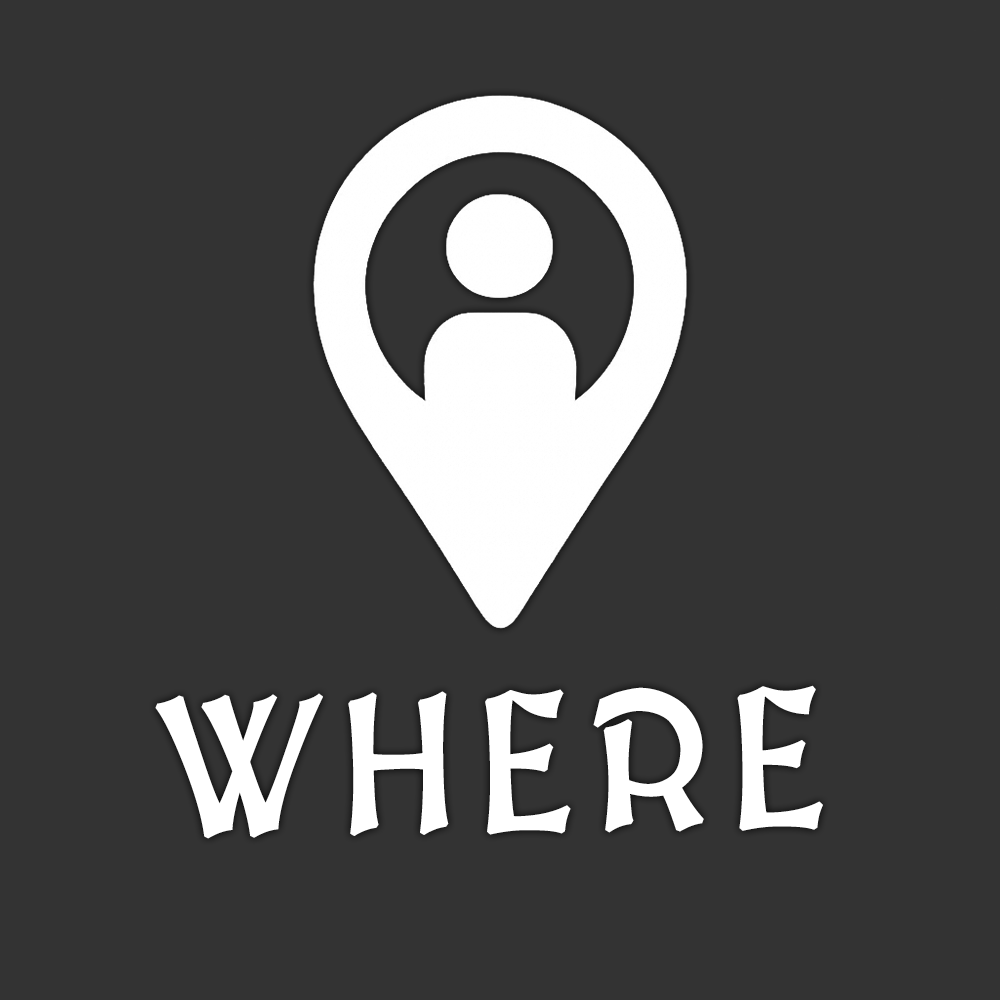
<style>
.page{position:relative;width:1000px;height:1000px;background:#333333}
.page>*{position:absolute;margin:0}
.t1{font:188.2px "MedievalSharp";letter-spacing:0.06em;color:#ffffff;text-transform:uppercase;font-weight:bold}
</style>
<div class="page">
<p class="t1" style="left:155px;top:685px;width:668px;height:154px;rotate:-1deg">WHERE</p>
</div>
